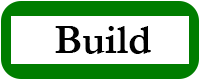
<style>
.page{position:relative;width:200px;height:80px;background:#ffffff}
.page>*{position:absolute;margin:0}
.t1{font:41.7px "Garamond-Bold";color:#000000}
</style>
<div class="page">
<p class="t1" style="left:55px;top:26px;width:96px;height:28px">Build</p>
</div>
